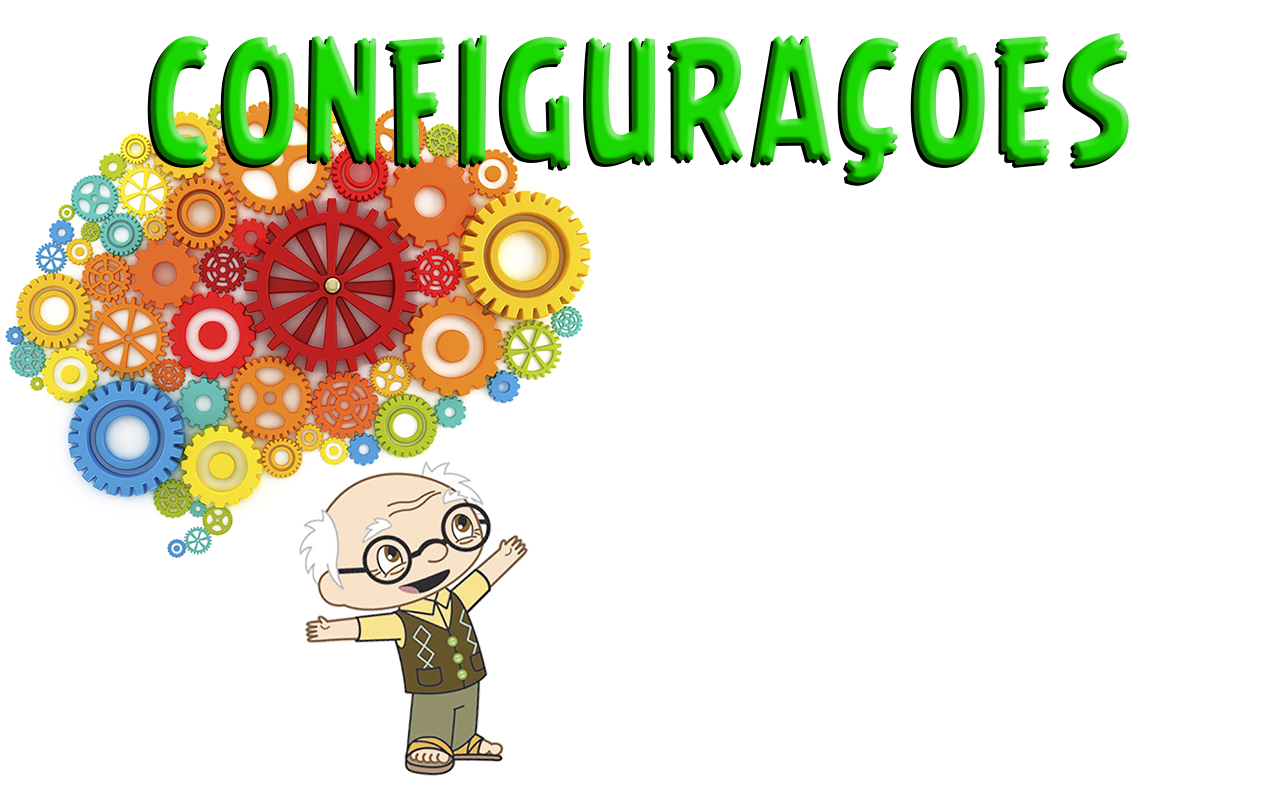
<style>
.page{position:relative;width:1280px;height:800px;background:#ffffff}
.page>*{position:absolute;margin:0}
.t1{font:156px "AngryBirds-Regular";letter-spacing:0.05em;font-weight:bold;scale:0.83 1}
</style>
<div class="page">
<p class="t1" style="left:150px;top:33px;width:979px;height:150px">CONFIGURAÇOES</p>
</div>
